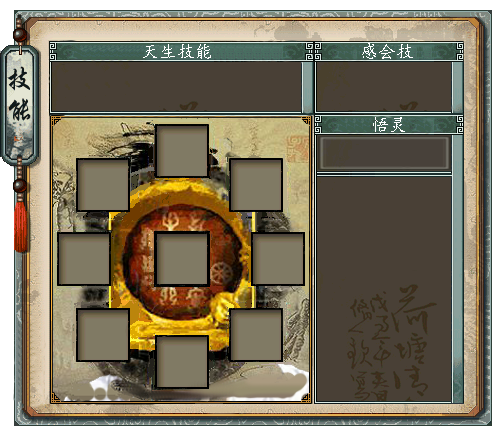
<style>
.page{position:relative;width:492px;height:445px;background:#494036}
.page>*{position:absolute;margin:0}
.t1{font:18px "¿¬Ìå";color:#ffffff}
</style>
<div class="page">
<p class="t1" style="left:143px;top:44px;width:68px;height:15px">天生技能</p>
<p class="t1" style="left:362px;top:43px;width:51px;height:16px">感会技</p>
<p class="t1" style="left:373px;top:117px;width:32px;height:15px">悟灵</p>
</div>
